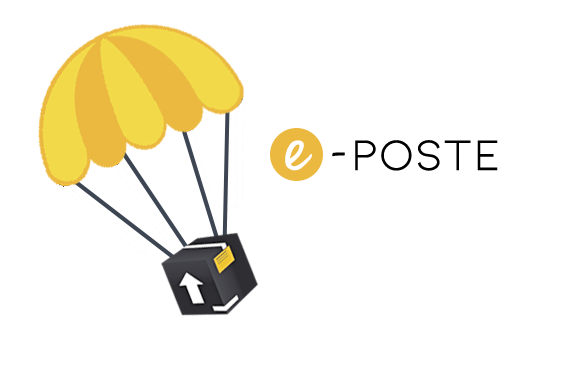
<style>
.page{position:relative;width:567px;height:381px;background:#ffffff}
.page>*{position:absolute;margin:0}
.t1{font:45px "Kiona-Regular";color:#000000;font-weight:bold}
.t2{font:100px "JennaSue";color:#ffffff;font-weight:bold}
.t3{font:72px "JennaSue";color:#000000;font-weight:bold}
</style>
<div class="page">
<p class="t1" style="left:285px;top:140px;width:213px;height:31px"><span class="t2">e </span><span class="t3">-</span>Poste</p>
</div>
